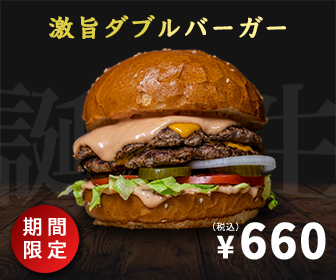
<style>
.page{position:relative;width:336px;height:280px;background:#141414}
.page>*{position:absolute;margin:0}
.t1{font:25px "YuKyo_Yoko-Bold";letter-spacing:0.05em;font-weight:bold}
.t2{font:20px "NotoSansJP-Medium";letter-spacing:0.2em;color:#ffffff;font-weight:bold}
.t3{font:9px "NotoSansJP-Regular";letter-spacing:0.045em;color:#ffffff;font-weight:bold}
.t4{font:48.6px "NotoSansJP-Bold";letter-spacing:0.045em;color:#ffffff;font-weight:bold;scale:0.95 1}
.t5{font:31.1px "NotoSansJP-Bold";letter-spacing:0.045em;color:#ffffff;font-weight:bold;scale:0.95 1}
</style>
<div class="page">
<p class="t1" style="left:49px;top:15px;width:237px;height:24px">激旨ダブルバーガー</p>
<p class="t2" style="left:23px;top:217px;width:43px;height:19px">期間</p>
<p class="t3" style="left:213px;top:222px;width:26px;height:9px">（税込）</p>
<p class="t4" style="left:217px;top:222px;width:109px;height:38px"><span class="t5">¥</span>660</p>
<p class="t2" style="left:24px;top:240px;width:43px;height:19px">限定</p>
</div>
